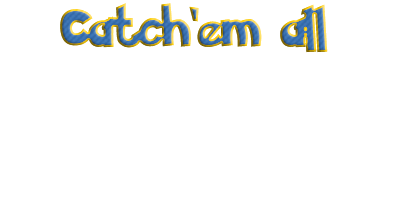
<style>
.page{position:relative;width:400px;height:200px;background:#ffffff}
.page>*{position:absolute;margin:0}
.t1{font:45px "PokemonSolidNormal"}
</style>
<div class="page">
<p class="t1" style="left:60px;top:3px;width:268px;height:50px">Catch’em all</p>
</div>
